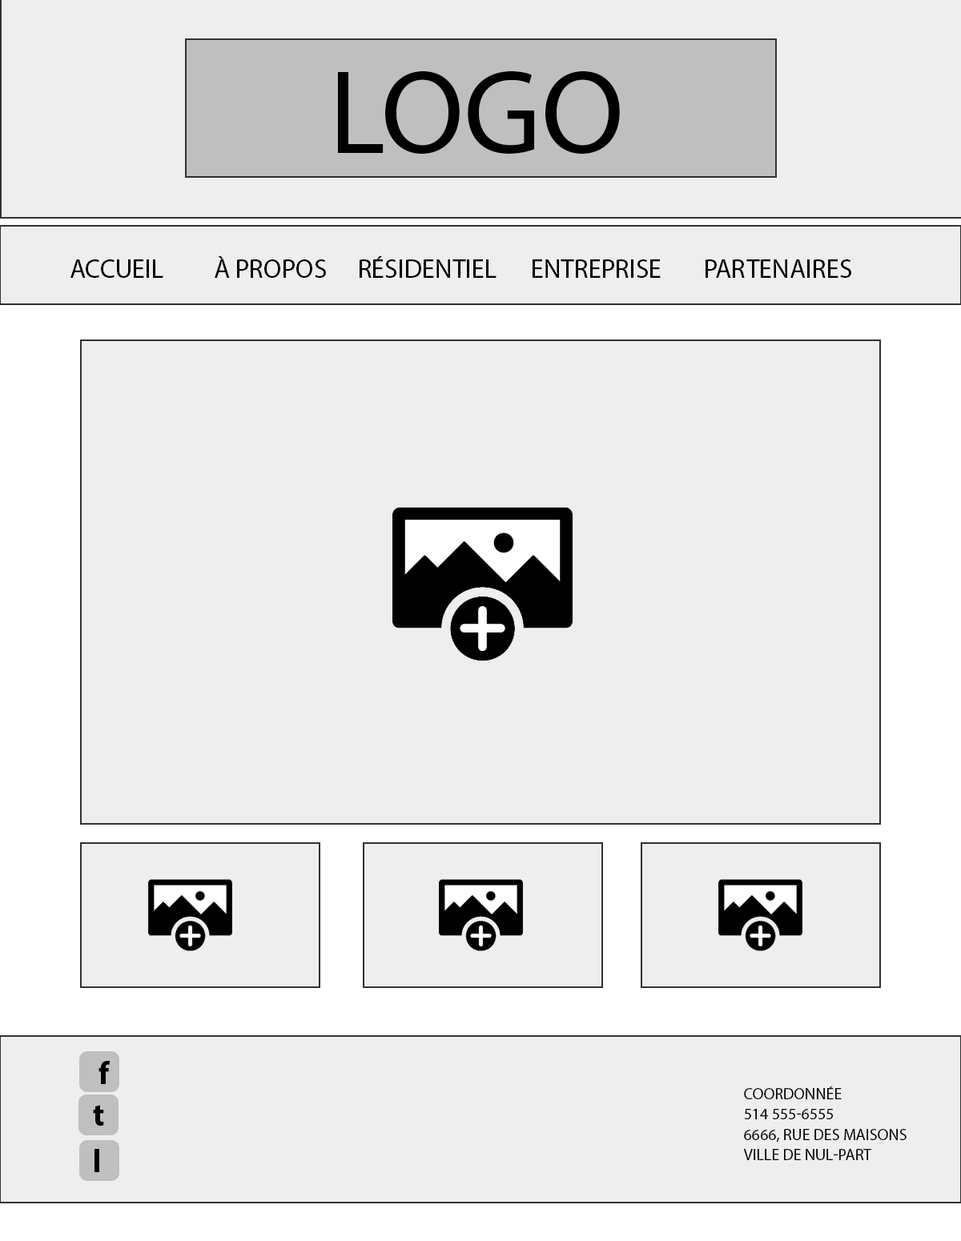
<style>
.page{position:relative;width:961px;height:1241px;background:#eeeeee}
.page>*{position:absolute;margin:0}
.t1{font:120.1px "MyriadPro-Regular";color:#000000;text-transform:uppercase}
.t2{font:26.4px "MyriadPro-Regular";color:#000000;text-transform:uppercase}
.t3{font:32px "MyriadPro-Bold";color:#000000}
.t4{font:16px "MyriadPro-Regular";color:#000000;text-transform:uppercase}
</style>
<div class="page">
<p class="t1" style="left:338px;top:70px;width:282px;height:85px">logo</p>
<p class="t2" style="left:70px;top:256px;width:781px;height:22px">accueil  à propos  résidentiel  entreprise  partenaires</p>
<p class="t3" style="left:98px;top:1061px;width:12px;height:23px">f</p>
<p class="t4" style="left:743px;top:1086px;width:163px;height:74px">coordonnée<br>514 555-6555<br>6666, rUE DES MAISONS<br>VILLE DE NUL-PART</p>
<p class="t3" style="left:93px;top:1105px;width:11px;height:21px">t</p>
</div>
